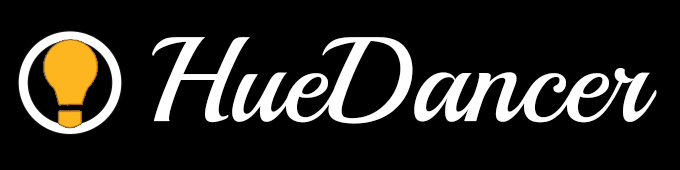
<style>
.page{position:relative;width:680px;height:170px;background:#000000}
.page>*{position:absolute;margin:0}
.t1{font:120px "Playball-Regular";color:#ffffff}
</style>
<div class="page">
<p class="t1" style="left:152px;top:37px;width:505px;height:87px">HueDancer</p>
</div>
